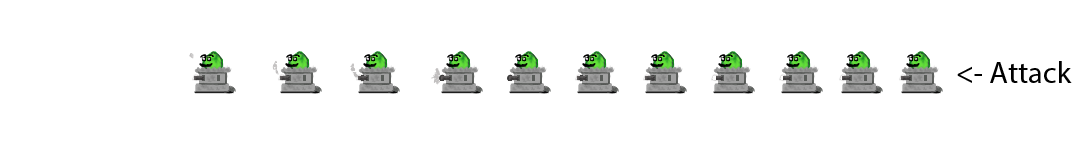
<style>
.page{position:relative;width:1080px;height:144px;background:#ffffff}
.page>*{position:absolute;margin:0}
.t1{font:12px "MyriadPro-Regular";color:#000000}
</style>
<div class="page">
<p class="t1" style="left:957px;top:61px;width:115px;height:22px">&lt;- Attack</p>
</div>
